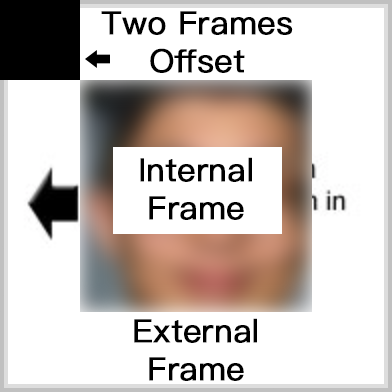
<style>
.page{position:relative;width:392px;height:392px;background:#ffffff}
.page>*{position:absolute;margin:0}
.t1{font:32px "PingFangSC-Regular";color:#000000;font-weight:bold}
</style>
<div class="page">
<p class="t1" style="left:101px;top:11px;width:192px;height:62px;text-align:center">Two Frames<br>Offset</p>
<p class="t1" style="left:140px;top:157px;width:112px;height:63px;text-align:center">Internal<br>Frame</p>
<p class="t1" style="left:134px;top:318px;width:123px;height:63px;text-align:center">External<br>Frame</p>
</div>
